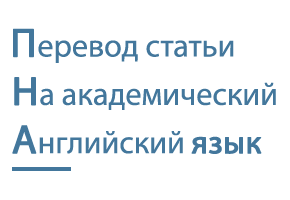
<style>
.page{position:relative;width:290px;height:200px;background:#ffffff}
.page>*{position:absolute;margin:0}
.t1{font:32.2px "MyriadPro-Regular";color:#43779c}
.t2{font:40.3px "MyriadPro-Regular";color:#43779c;font-weight:bold}
.t3{font:32.2px "MyriadPro-Regular";color:#43779c;font-weight:bold}
</style>
<div class="page">
<p class="t1" style="left:12px;top:28px;width:264px;height:126px"><span class="t2">П</span>еревод статьи<br>            <span class="t2">Н</span>а академический<br>            <span class="t2">А</span>нглийский <span class="t3">язык</span></p>
</div>
